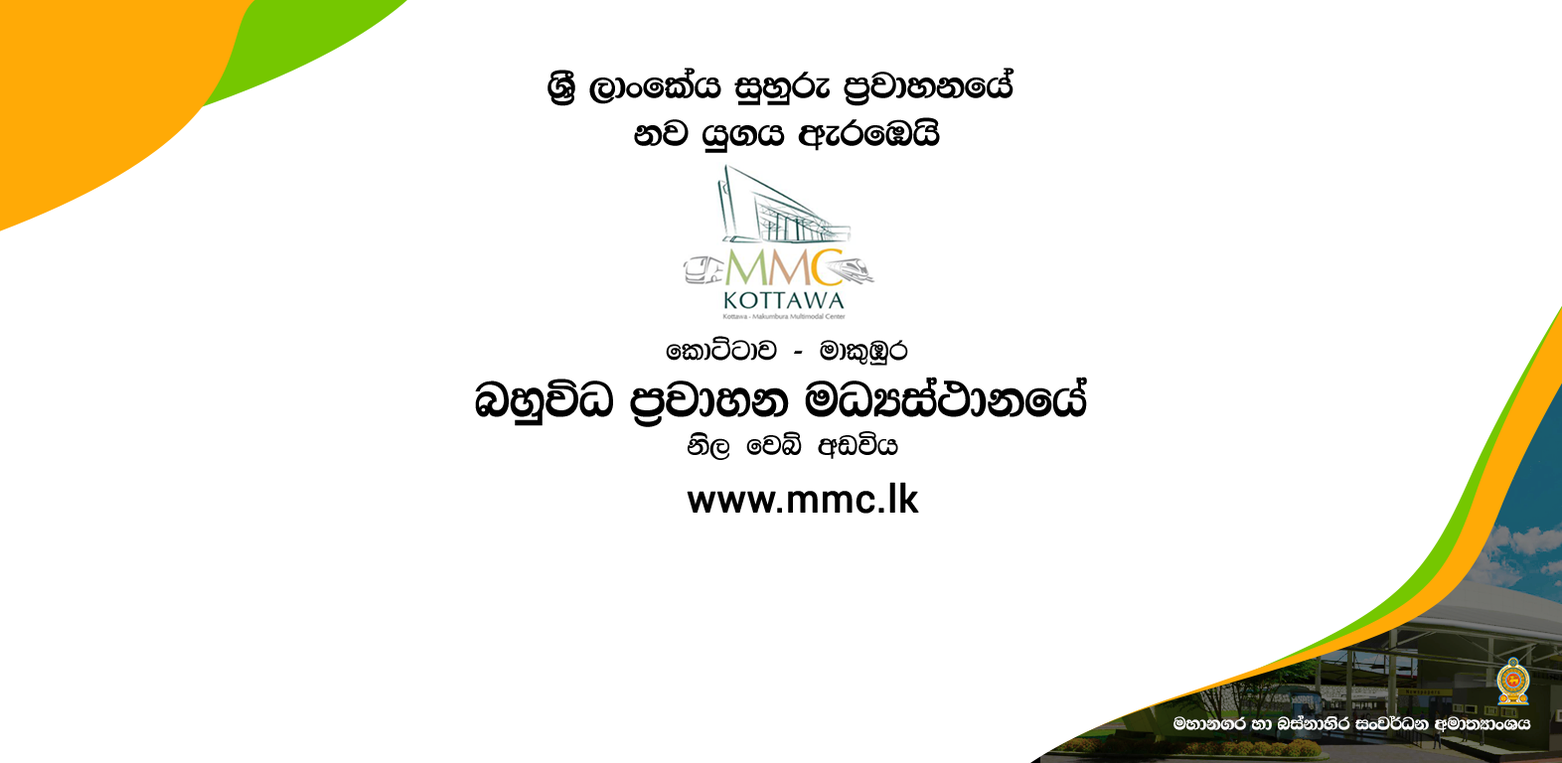
<style>
.page{position:relative;width:1562px;height:763px;background:#ffffff}
.page>*{position:absolute;margin:0}
.t1{font:39.7px "4u-Emanee";color:#000000;scale:1.05 1}
.t2{font:47.4px "0KDNAMAL";color:#000000}
.t3{font:31.5px "IWSujeeva";color:#000000}
.t4{font:31.7px "IWSujeeva";color:#000000}
.t5{font:38.3px "Roboto-Regular";color:#000000;font-weight:bold}
.t6{font:19px "4u-Amanthax";color:#ffffff}
</style>
<div class="page">
<p class="t1" style="left:548px;top:68px;width:467px;height:85px;text-align:center">YS% ,dxflah iqyqre m%jdykfha <br>kj hq.h werfUhs</p>
<p class="t2" style="left:475px;top:336px;width:612px;height:124px;text-align:center"><span class="t3">fldÜgdj - udl=Uqr <br></span>nyqúO m%jdyk uOHia:dkfha <br><span class="t4">ks, fjí wvúh</span></p>
<p class="t5" style="left:687px;top:482px;width:232px;height:32px">www.mmc.lk</p>
<p class="t6" style="left:1174px;top:716px;width:357px;height:16px">uydk.r yd niakdysr ixj¾Ok wud;HdxYh</p>
</div>
